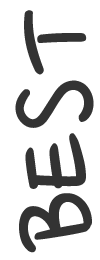
<style>
.page{position:relative;width:100px;height:260px;background:#ffffff}
.page>*{position:absolute;margin:0}
.t1{font:140.1px "NanumPen";color:#333333}
</style>
<div class="page">
<p class="t1" style="left:15px;top:10px;width:79px;height:243px;rotate:-90deg">BEST</p>
</div>
